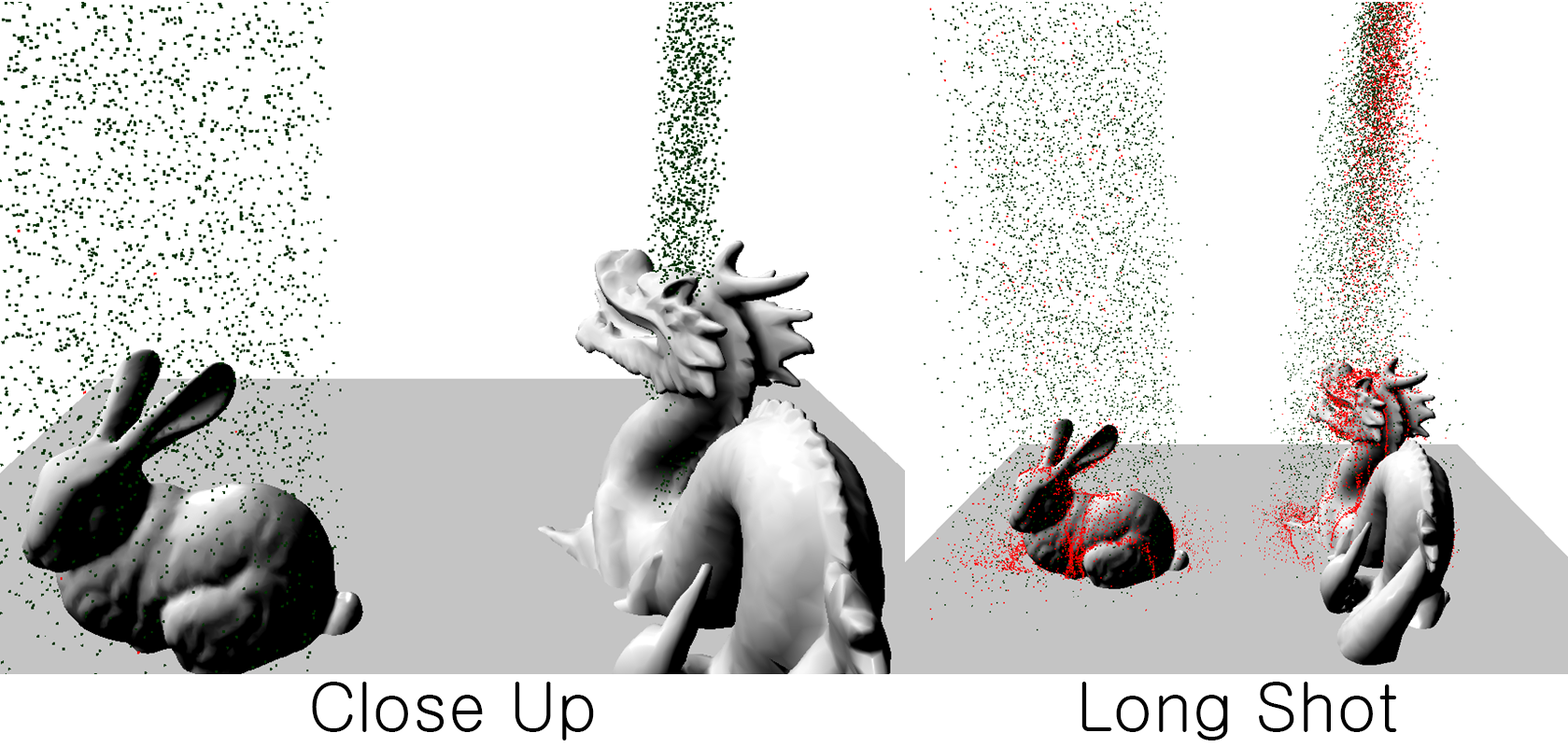
<style>
.page{position:relative;width:1568px;height:747px;background:#ffffff}
.page>*{position:absolute;margin:0}
.t1{font:67.2px "Gulim";color:#000000}
</style>
<div class="page">
<p class="t1" style="left:312px;top:682px;width:282px;height:59px">Close Up</p>
<p class="t1" style="left:1081px;top:682px;width:316px;height:59px">Long Shot</p>
</div>
